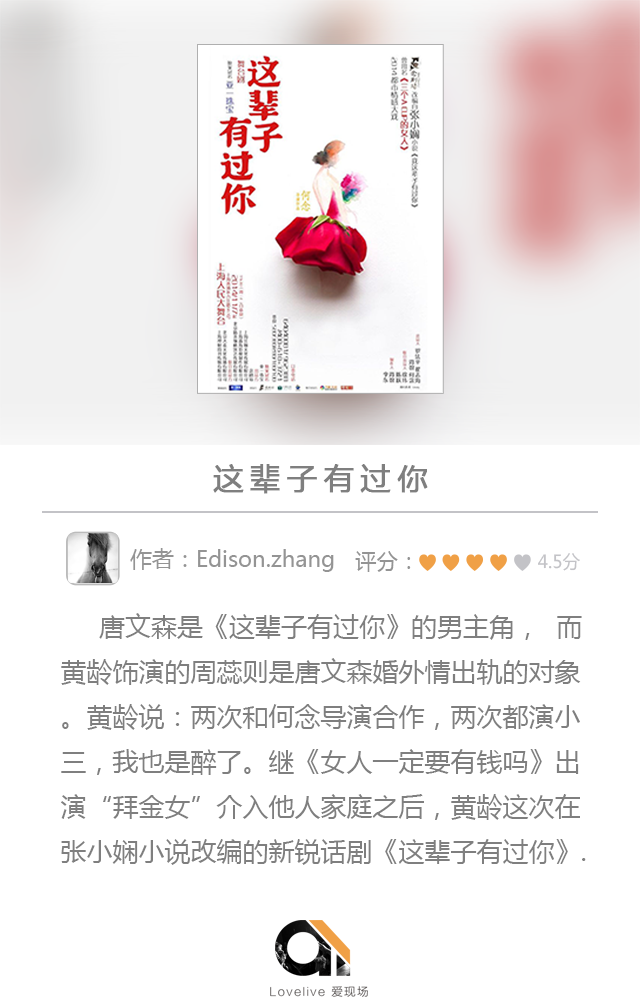
<style>
.page{position:relative;width:640px;height:1008px;background:#ffffff}
.page>*{position:absolute;margin:0}
.t1{font:30px "MicrosoftYaHei";letter-spacing:0.2em;color:#7f7f7f;font-weight:bold}
.t2{font:22px "MicrosoftYaHei";color:#949494}
.t3{font:18px "MicrosoftYaHei";color:#c3c3c7}
.t4{font:26px/45px "MicrosoftYaHei";color:#7f7f7f}
</style>
<div class="page">
<p class="t1" style="left:213px;top:464px;width:215px;height:30px">这辈子有过你</p>
<p class="t2" style="left:130px;top:548px;width:204px;height:24px">作者：Edison.zhang</p>
<p class="t2" style="left:355px;top:551px;width:56px;height:21px">评分：</p>
<p class="t3" style="left:538px;top:553px;width:42px;height:18px">4.5分</p>
<p class="t4" style="left:61px;top:613px;width:525px;height:252px">唐文森是《这辈子有过你》的男主角，  而<br>黄龄饰演的周蕊则是唐文森婚外情出轨的对象<br>。黄龄说：两次和何念导演合作，两次都演小<br>三，我也是醉了。继《女人一定要有钱吗》出<br>演“拜金女”介入他人家庭之后，黄龄这次在<br>张小娴小说改编的新锐话剧《这辈子有过你》.</p>
</div>
